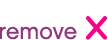
<style>
.page{position:relative;width:108px;height:40px;background:#ffffff}
.page>*{position:absolute;margin:0}
.t1{font:22.9px "ChaletE-LondonSixty";color:#92377d}
</style>
<div class="page">
<p class="t1" style="left:0px;top:26px;width:77px;height:14px">remove</p>
</div>
